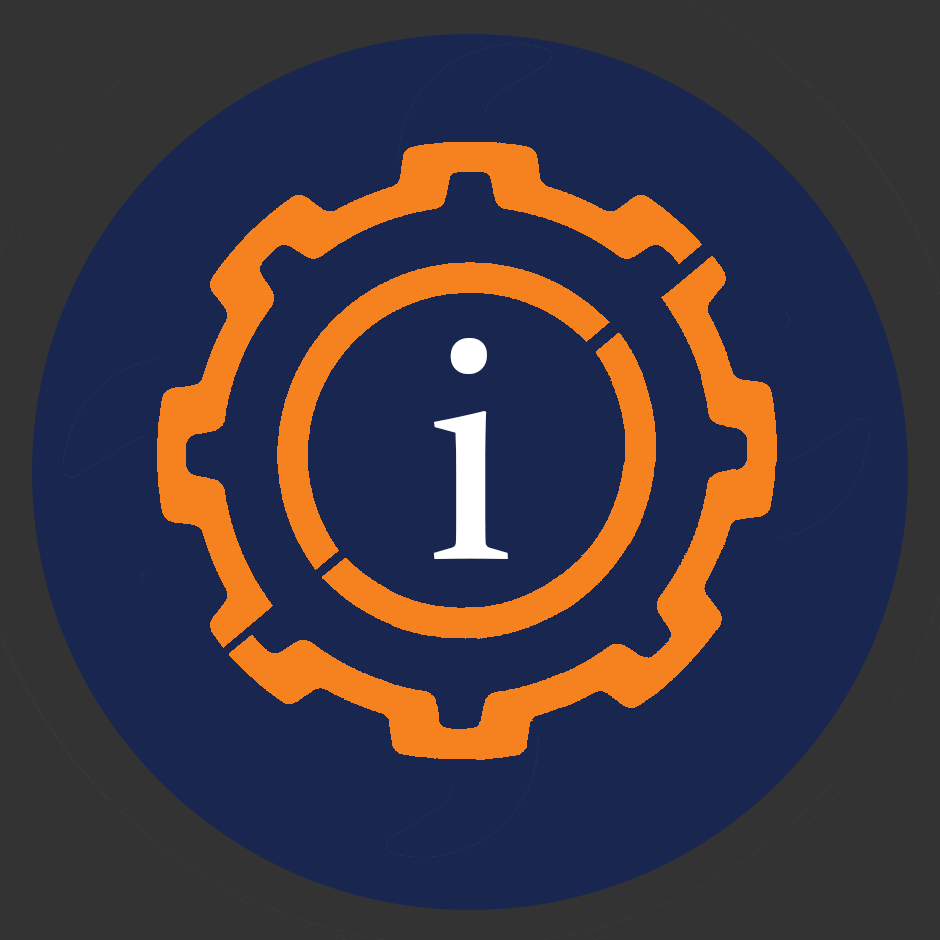
<style>
.page{position:relative;width:940px;height:940px;background:#192650}
.page>*{position:absolute;margin:0}
.t1{font:320px "Constantia";color:#ffffff}
</style>
<div class="page">
<p class="t1" style="left:433px;top:338px;width:75px;height:221px">i</p>
</div>
